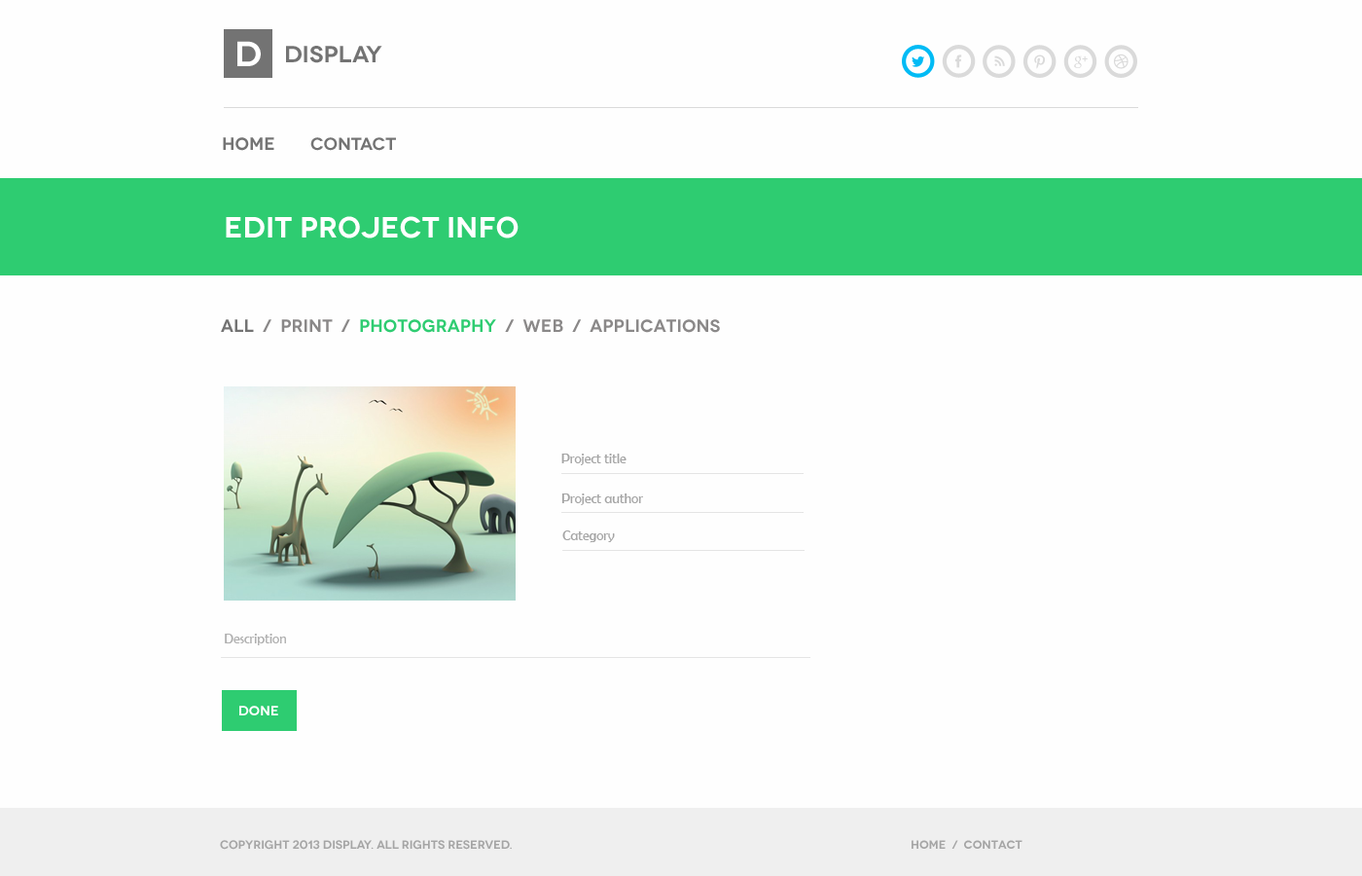
<style>
.page{position:relative;width:1362px;height:876px;background:#fefefe}
.page>*{position:absolute;margin:0}
.t1{font:35px "Novecentowide-DemiBold";color:#ffffff}
.t2{font:23.3px "Novecentowide-DemiBold";color:#737373}
.t3{font:17.5px "Novecentowide-DemiBold";color:#737373}
.t4{font:29.2px "Novecentowide-DemiBold";color:#ffffff}
.t5{font:17.5px "Novecentowide-DemiBold";color:#8a8888}
.t6{font:17.5px "Novecentowide-DemiBold";color:#2ecc71}
.t7{font:13.6px "BerlinSansFB-Reg";color:#a5a5a5}
.t8{font:13.6px "BerlinSansFB-Reg";color:#afafaf}
.t9{font:13.6px "Novecentowide-DemiBold";color:#ffffff}
.t10{font:11.7px "Novecentowide-DemiBold";color:#a5a5a5;text-transform:uppercase}
</style>
<div class="page">
<p class="t1" style="left:237px;top:41px;width:24px;height:25px">D</p>
<p class="t2" style="left:286px;top:46px;width:96px;height:17px">Display</p>
<p class="t3" style="left:223px;top:137px;width:51px;height:14px">Home</p>
<p class="t3" style="left:310px;top:137px;width:86px;height:14px">Contact</p>
<p class="t4" style="left:226px;top:216px;width:293px;height:22px">edit project info</p>
<p class="t5" style="left:221px;top:319px;width:499px;height:14px"><span class="t3">All</span>  /  Print  /  <span class="t6">Photography </span> /  Web  /  Applications</p>
<p class="t7" style="left:561px;top:453px;width:65px;height:12px">Project title</p>
<p class="t7" style="left:561px;top:493px;width:82px;height:12px">Project author</p>
<p class="t7" style="left:562px;top:530px;width:53px;height:13px">Category</p>
<p class="t8" style="left:225px;top:633px;width:61px;height:12px">Description</p>
<p class="t9" style="left:239px;top:705px;width:39px;height:10px">done</p>
<p class="t10" style="left:220px;top:840px;width:292px;height:9px">Copyright 2013 Display. All Rights Reserved.</p>
<p class="t10" style="left:912px;top:840px;width:110px;height:8px">Home  /  Contact</p>
</div>
